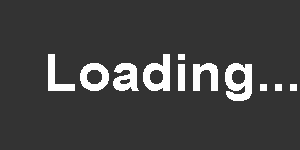
<style>
.page{position:relative;width:300px;height:150px;background:#333333}
.page>*{position:absolute;margin:0}
.t1{font:51.9px "Arial-BoldMT";color:#ffffff;scale:1.05 1}
</style>
<div class="page">
<p class="t1" style="left:48px;top:54px;width:249px;height:47px">Loading...</p>
</div>
